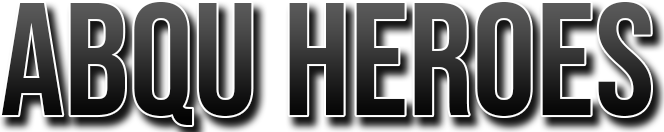
<style>
.page{position:relative;width:664px;height:132px}
.page>*{position:absolute;margin:0}
.t1{font:160px "BebasNeue-Regular"}
</style>
<div class="page">
<p class="t1" style="left:1px;top:2px;width:650px;height:123px">Abqu Heroes</p>
</div>
